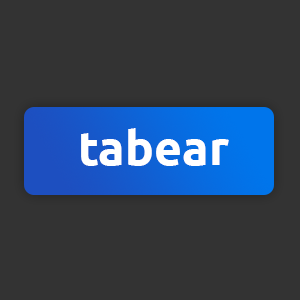
<style>
.page{position:relative;width:300px;height:300px;background:#333333}
.page>*{position:absolute;margin:0}
.t1{font:48.1px "Ubuntu-Bold";color:#ffffff}
</style>
<div class="page">
<p class="t1" style="left:81px;top:128px;width:148px;height:38px">tabear</p>
</div>
